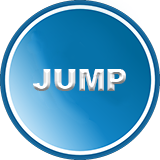
<style>
.page{position:relative;width:160px;height:160px;background:#ffffff}
.page>*{position:absolute;margin:0}
.t1{font:30px "Arial-Black"}
</style>
<div class="page">
<p class="t1" style="left:33px;top:69px;width:93px;height:22px">JUMP</p>
</div>
